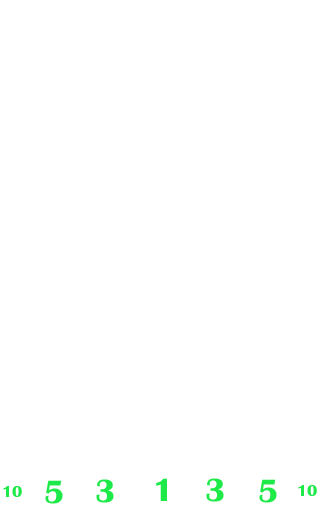
<style>
.page{position:relative;width:320px;height:512px;background:#ffffff}
.page>*{position:absolute;margin:0}
.t1{font:16.6px "BritannicBold";color:#1dea48}
.t2{font:33.2px "BritannicBold";color:#1dea48}
</style>
<div class="page">
<p class="t1" style="left:3px;top:486px;width:19px;height:11px">10</p>
<p class="t2" style="left:45px;top:480px;width:18px;height:24px">5</p>
<p class="t2" style="left:96px;top:479px;width:18px;height:24px">3</p>
<p class="t2" style="left:156px;top:478px;width:11px;height:23px">1</p>
<p class="t2" style="left:206px;top:478px;width:18px;height:24px">3</p>
<p class="t2" style="left:259px;top:479px;width:18px;height:24px">5</p>
<p class="t1" style="left:298px;top:485px;width:19px;height:11px">10</p>
</div>
